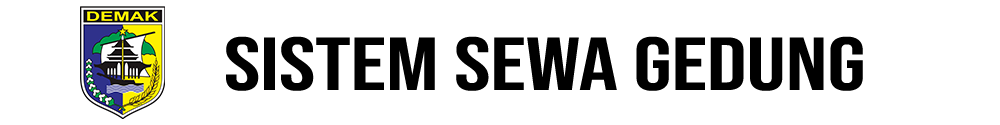
<style>
.page{position:relative;width:1000px;height:125px;background:#ffffff}
.page>*{position:absolute;margin:0}
.t1{font:75px "BebasNeue-Regular";color:#000000;scale:1.3 1}
</style>
<div class="page">
<p class="t1" style="left:226px;top:36px;width:637px;height:55px">SISTEM SEWA GEDUNG</p>
</div>
